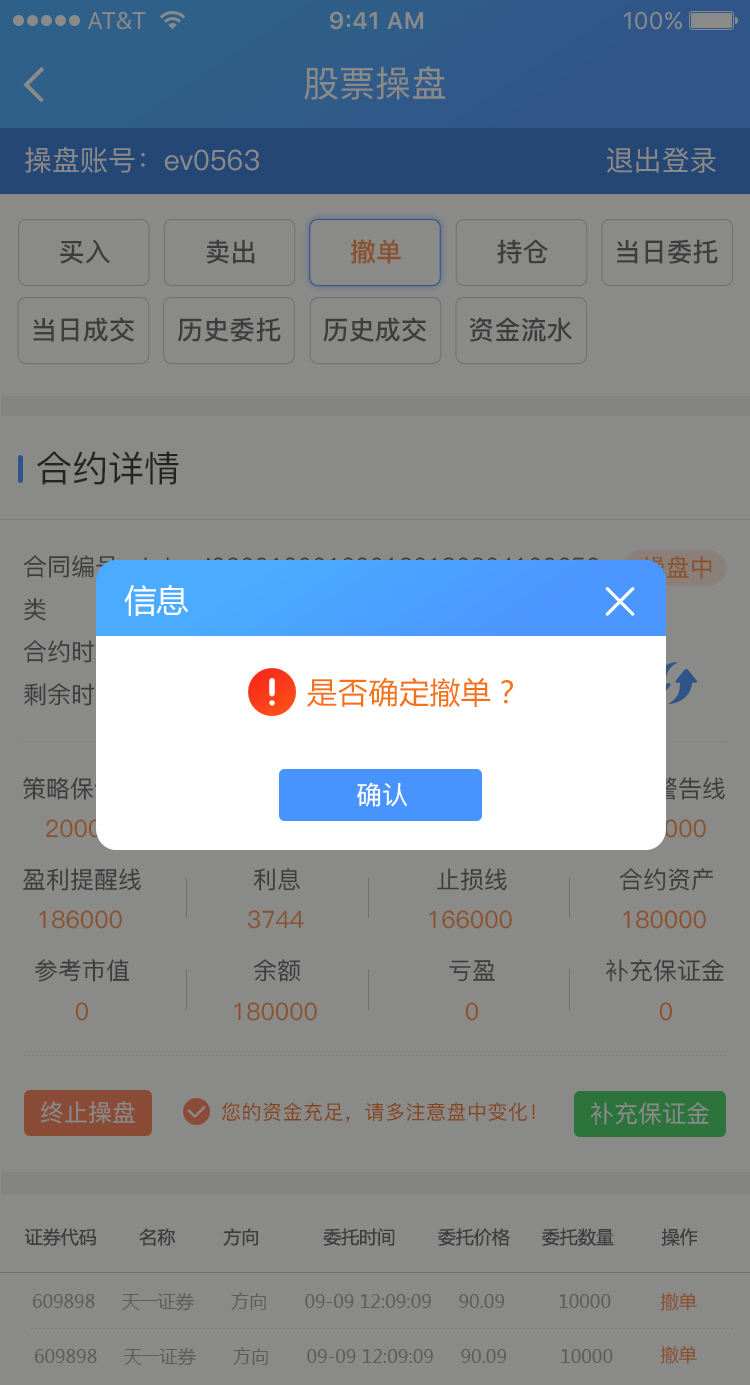
<style>
.page{position:relative;width:750px;height:1385px;background:#8a8a89}
.page>*{position:absolute;margin:0}
.t1{font:36px "PingFang-SC-Medium";color:#8a8a89}
.t2{font:28px "PingFang-SC-Medium";color:#8a8a89}
.t3{font:26px "PingFang-SC-Bold";color:#3d3d3d}
.t4{font:26px "PingFang-SC-Bold";color:#8a512b}
.t5{font:36px "PingFang-SC-Medium";color:#333333}
.t6{font:24px "PingFang-SC-Medium";color:#8a512b}
.t7{font:32px "MicrosoftYaHei";color:#ffffff}
.t8{font:30px "MicrosoftYaHei";letter-spacing:0.025em;color:#f77116}
.t9{font:26px "PingFang-SC-Medium";color:#ffffff}
.t10{font:24px "PingFang-SC-Medium";color:#3d3d3d}
.t11{font:24px "PingFang-SC-Medium";color:#8a8a89}
.t12{font:20px "PingFang-SC-Medium";letter-spacing:0.025em;color:#864315}
.t13{font:18px "MicrosoftYaHei";color:#3d3d3d}
.t14{font:18px "MicrosoftYaHei";color:#5d5d5c}
.t15{font:18px "MicrosoftYaHei";color:#8a512b}
</style>
<div class="page">
<p class="t1" style="left:304px;top:66px;width:142px;height:34px">股票操盘</p>
<p class="t2" style="left:25px;top:146px;width:691px;height:27px">操盘账号：ev0563                                     退出登录</p>
<p class="t3" style="left:60px;top:239px;width:50px;height:25px">买入</p>
<p class="t3" style="left:206px;top:239px;width:49px;height:25px">卖出</p>
<p class="t4" style="left:350px;top:239px;width:51px;height:25px">撤单</p>
<p class="t3" style="left:497px;top:239px;width:51px;height:25px">持仓</p>
<p class="t3" style="left:617px;top:239px;width:101px;height:25px">当日委托</p>
<p class="t3" style="left:33px;top:317px;width:101px;height:25px">当日成交</p>
<p class="t3" style="left:178px;top:317px;width:103px;height:25px">历史委托</p>
<p class="t3" style="left:323px;top:317px;width:103px;height:25px">历史成交</p>
<p class="t3" style="left:469px;top:317px;width:103px;height:25px">资金流水</p>
<p class="t5" style="left:37px;top:451px;width:142px;height:34px">合约详情</p>
<p class="t6" style="left:642px;top:556px;width:70px;height:23px">操盘中</p>
<p class="t7" style="left:124px;top:584px;width:65px;height:32px">信息</p>
<p class="t8" style="left:307px;top:677px;width:206px;height:31px">是否确定撤单？</p>
<p class="t9" style="left:357px;top:782px;width:51px;height:25px">确认</p>
<p class="t10" style="left:23px;top:868px;width:118px;height:23px">盈利提醒线</p>
<p class="t10" style="left:254px;top:868px;width:46px;height:23px">利息</p>
<p class="t10" style="left:437px;top:868px;width:70px;height:23px">止损线</p>
<p class="t10" style="left:619px;top:868px;width:94px;height:23px">合约资产</p>
<p class="t6" style="left:39px;top:910px;width:83px;height:19px">186000</p>
<p class="t6" style="left:248px;top:910px;width:56px;height:19px">3744</p>
<p class="t6" style="left:429px;top:910px;width:83px;height:19px">166000</p>
<p class="t6" style="left:623px;top:910px;width:83px;height:19px">180000</p>
<p class="t10" style="left:35px;top:959px;width:95px;height:23px">参考市值</p>
<p class="t10" style="left:253px;top:959px;width:48px;height:23px">余额</p>
<p class="t10" style="left:449px;top:960px;width:46px;height:22px">亏盈</p>
<p class="t10" style="left:606px;top:959px;width:118px;height:23px">补充保证金</p>
<p class="t6" style="left:75px;top:1002px;width:14px;height:19px">0</p>
<p class="t6" style="left:234px;top:1002px;width:83px;height:19px">180000</p>
<p class="t6" style="left:465px;top:1002px;width:14px;height:19px">0</p>
<p class="t6" style="left:659px;top:1002px;width:14px;height:19px">0</p>
<p class="t11" style="left:41px;top:1101px;width:94px;height:23px">终止操盘</p>
<p class="t12" style="left:221px;top:1102px;width:314px;height:21px">您的资金充足，请多注意盘中变化！</p>
<p class="t11" style="left:591px;top:1102px;width:118px;height:23px">补充保证金</p>
<p class="t13" style="left:25px;top:1228px;width:673px;height:18px">证券代码        名称         方向            委托时间        委托价格      委托数量         操作</p>
<p class="t14" style="left:32px;top:1292px;width:579px;height:19px">609898     天一证券       方向       09-09 12:09:09     90.09          10000</p>
<p class="t15" style="left:660px;top:1293px;width:37px;height:18px">撤单</p>
<p class="t14" style="left:34px;top:1347px;width:579px;height:19px">609898     天一证券       方向       09-09 12:09:09     90.09          10000</p>
<p class="t15" style="left:660px;top:1346px;width:37px;height:18px">撤单</p>
</div>
